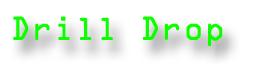
<style>
.page{position:relative;width:256px;height:64px;background:#ffffff}
.page>*{position:absolute;margin:0}
.t1{font:30px "OCRAStd";color:#0cfe00}
</style>
<div class="page">
<p class="t1" style="left:13px;top:16px;width:210px;height:31px">Drill Drop</p>
</div>
